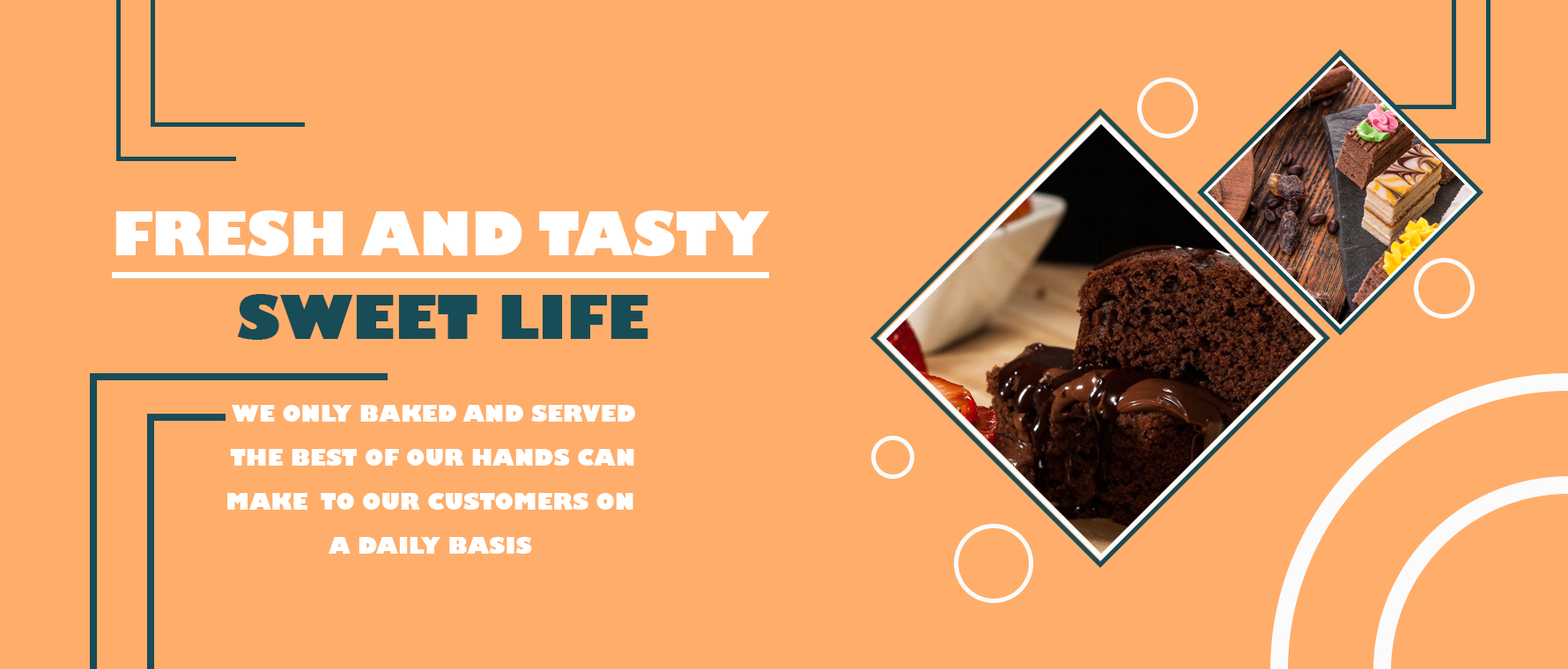
<style>
.page{position:relative;width:1568px;height:669px;background:#ffad6a}
.page>*{position:absolute;margin:0}
.t1{font:58.7px "GillSans-UltraBold";color:#ffffff}
.t2{font:58.7px "GillSans-UltraBold";color:#184c57}
.t3{font:22px/44px "GillSans-UltraBold";letter-spacing:0.002em;color:#ffffff}
</style>
<div class="page">
<p class="t1" style="left:115px;top:211px;width:655px;height:45px">FRESH AND TASTY</p>
<p class="t2" style="left:237px;top:294px;width:411px;height:46px">SWEET LIFE</p>
<p class="t3" style="left:227px;top:405px;width:408px;height:149px;text-align:center">WE ONLY BAKED AND SERVED<br> THE BEST OF OUR HANDS CAN <br>MAKE  TO OUR CUSTOMERS ON <br>A DAILY BASIS</p>
</div>
